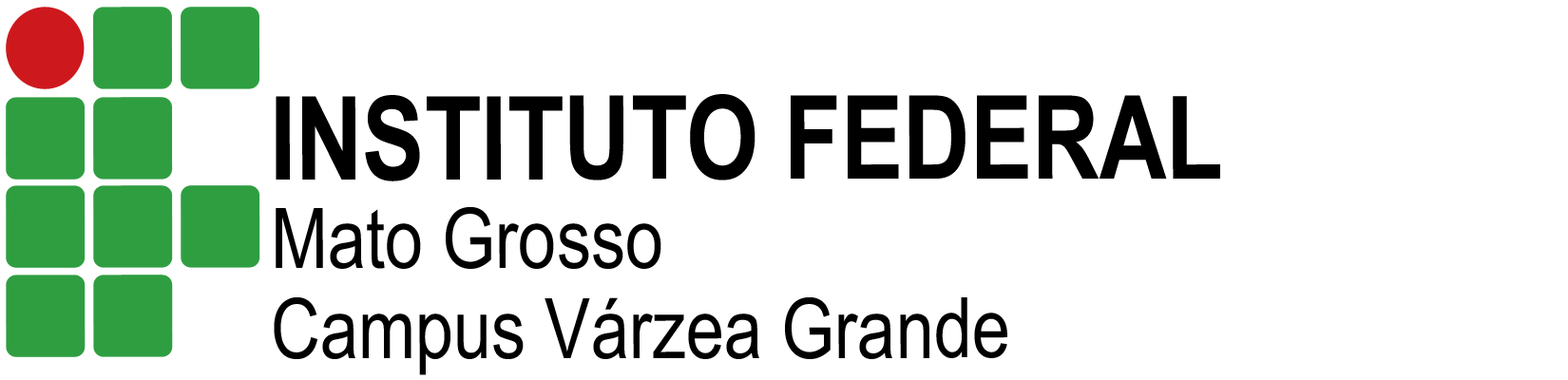
<style>
.page{position:relative;width:1568px;height:380px;background:#ffffff}
.page>*{position:absolute;margin:0}
.t1{font:115.9px "ArialNarrow-Bold";color:#000000}
.t2{font:83.6px "ArialNarrow";color:#000000}
</style>
<div class="page">
<p class="t1" style="left:276px;top:94px;width:944px;height:88px">INSTITUTO FEDERAL</p>
<p class="t2" style="left:276px;top:207px;width:385px;height:62px">Mato Grosso</p>
<p class="t2" style="left:274px;top:297px;width:733px;height:78px">Campus Várzea Grande</p>
</div>
